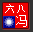
<style>
.page{position:relative;width:33px;height:32px;background:#f20000}
.page>*{position:absolute;margin:0}
.t1{font:10.4px "SimSun";color:#ffffff}
.t2{font:11.7px "SimSun";color:#ffffff}
</style>
<div class="page">
<p class="t1" style="left:5px;top:4px;width:20px;height:9px">六八</p>
<p class="t2" style="left:16px;top:15px;width:11px;height:12px">冯</p>
</div>
